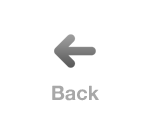
<style>
.page{position:relative;width:150px;height:130px;background:#ffffff}
.page>*{position:absolute;margin:0}
.t1{font:20px "AlteHaasGrotesk_Bold";color:#a8a8a8}
</style>
<div class="page">
<p class="t1" style="left:52px;top:85px;width:47px;height:16px">Back</p>
</div>
